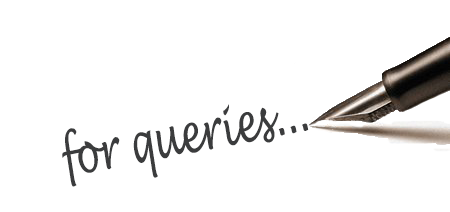
<style>
.page{position:relative;width:450px;height:212px;background:#ffffff}
.page>*{position:absolute;margin:0}
.t1{font:54.5px "LucidaHandwriting-Italic";color:#3b3c3d;scale:0.66 1}
</style>
<div class="page">
<p class="t1" style="left:62px;top:104px;width:247px;height:83px;rotate:-11deg">for queries...</p>
</div>
